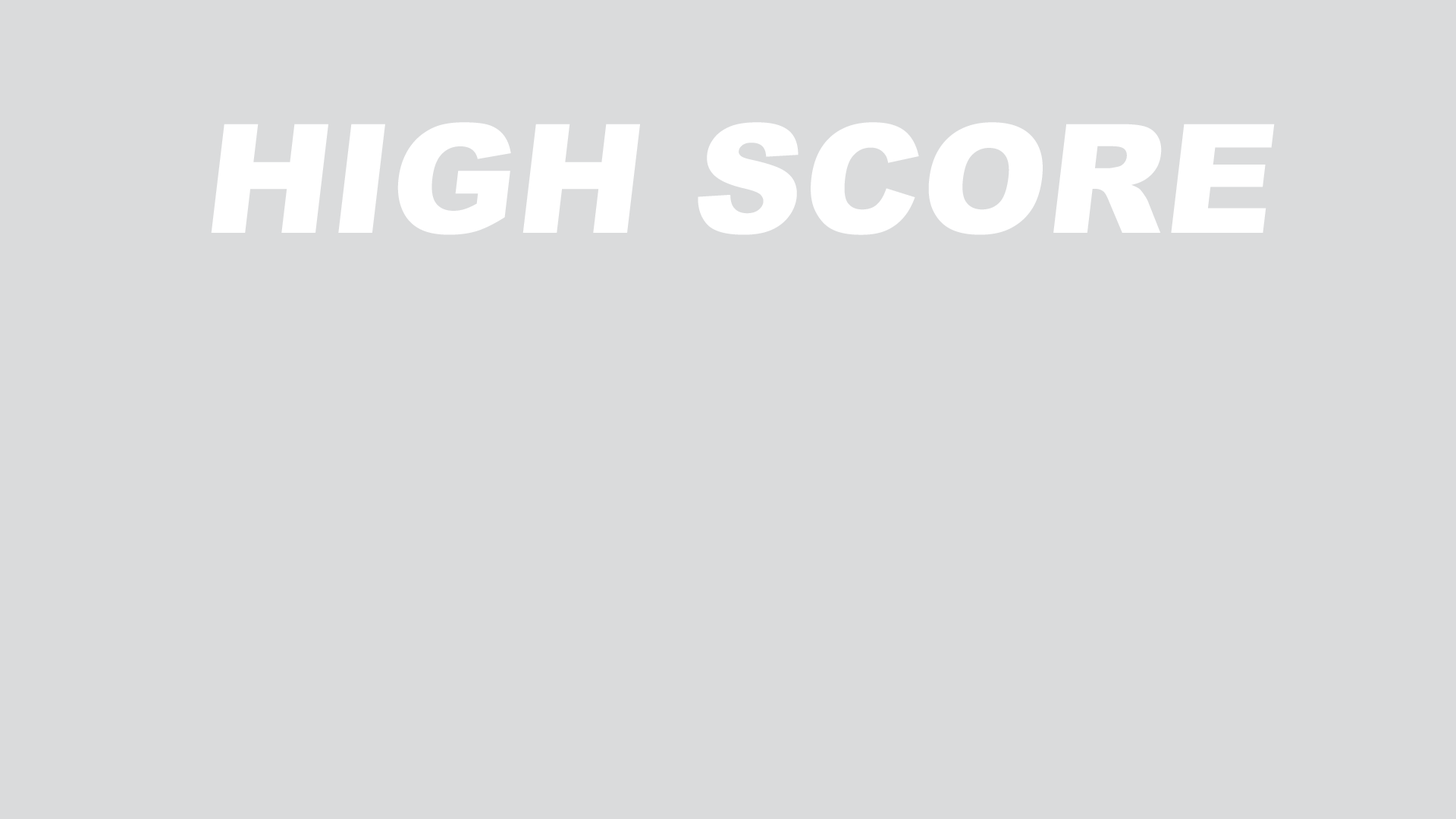
<style>
.page{position:relative;width:1456px;height:819px;background:#dadbdc}
.page>*{position:absolute;margin:0}
.t1{font:152.7px "Arial-Black";color:#ffffff}
</style>
<div class="page">
<p class="t1" style="left:211px;top:122px;width:1064px;height:113px">HIGH SCORE</p>
</div>
